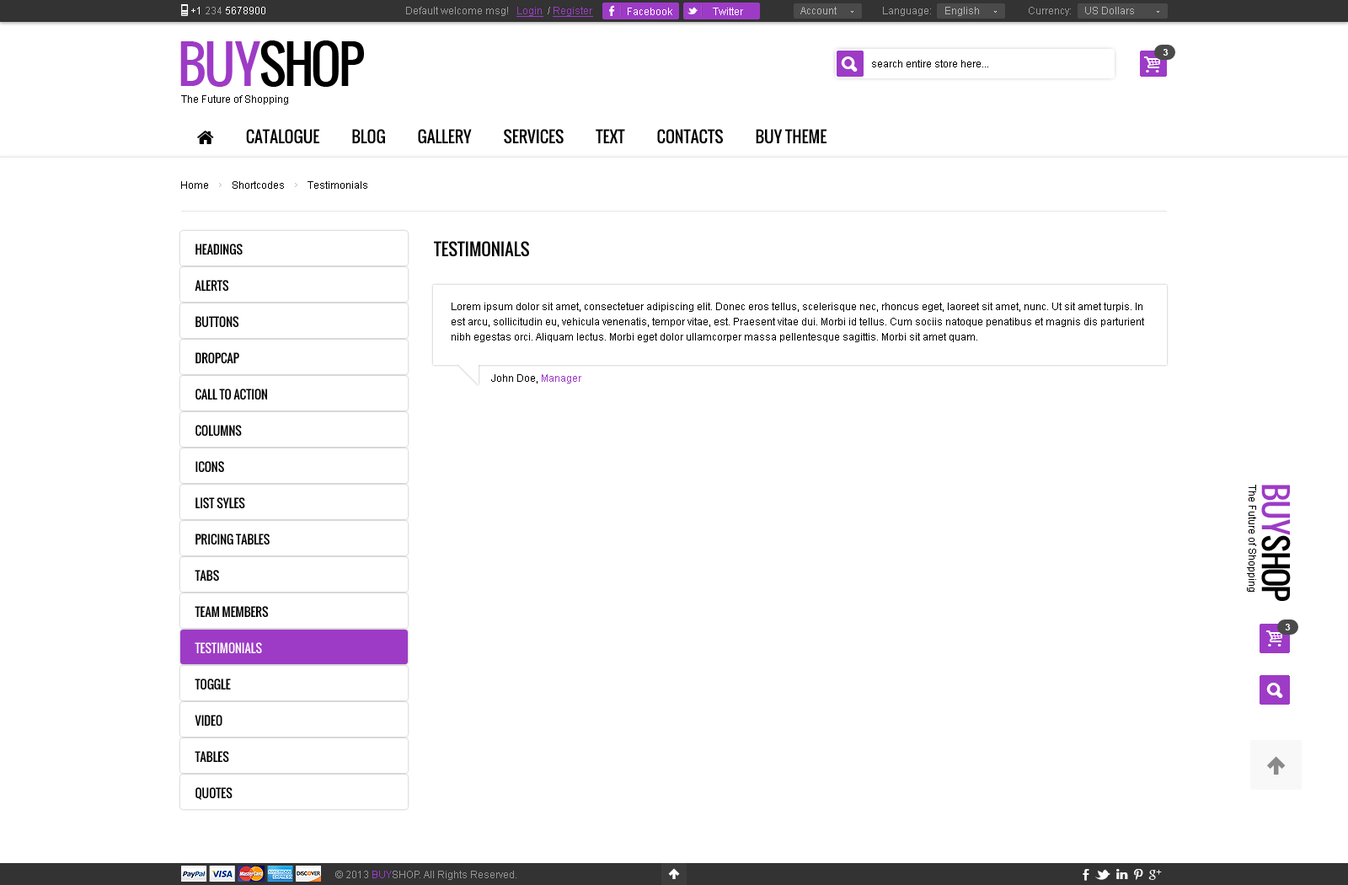
<style>
.page{position:relative;width:1348px;height:885px;background:#ffffff}
.page>*{position:absolute;margin:0}
.t1{font:10.1px "ArialMT";color:#ffffff}
.t2{font:10.1px "ArialMT";color:#9b9b9b}
.t3{font:10.1px "ArialMT";color:#9d3bc6;text-decoration:underline}
.t4{font:10.1px "ArialMT";color:#b6b6b6}
.t5{font:50.5px "Oswald";letter-spacing:-0.06em;color:#000000;text-transform:uppercase}
.t6{font:50.5px "Oswald";letter-spacing:-0.06em;color:#9d3bc6;text-transform:uppercase}
.t7{font:9.3px "Arial-BoldMT";color:#ffffff;text-transform:uppercase}
.t8{font:10.1px "ArialMT";color:#000000}
.t9{font:11.8px/36.2px "Oswald";color:#000000;text-transform:uppercase}
.t10{font:11.8px/36.2px "Oswald";color:#ffffff;text-transform:uppercase}
.t11{font:16.8px "Oswald";color:#000000;text-transform:uppercase}
.t12{font:10.1px/15.2px "ArialMT";color:#000000}
.t13{font:10.1px "ArialMT";color:#9d3bc6}
.t14{font:32px "Oswald";letter-spacing:-0.06em;color:#000000;text-transform:uppercase}
.t15{font:32px "Oswald";letter-spacing:-0.06em;color:#9d3bc6;text-transform:uppercase}
.t16{font:10.1px "ArialMT";color:#959595}
</style>
<div class="page">
<p class="t1" style="left:191px;top:7px;width:74px;height:7px">+1 <span class="t2">234 </span>5678900</p>
<p class="t2" style="left:406px;top:7px;width:187px;height:10px">Default welcome msg!   <span class="t3">Login </span> / <span class="t3">Register</span></p>
<p class="t2" style="left:406px;top:7px;width:187px;height:10px">Default welcome msg!   <span class="t3">Login </span> / <span class="t3">Register</span></p>
<p class="t1" style="left:628px;top:8px;width:44px;height:7px">Facebook</p>
<p class="t1" style="left:713px;top:8px;width:30px;height:7px">Twitter</p>
<p class="t4" style="left:800px;top:7px;width:37px;height:7px">Account</p>
<p class="t2" style="left:883px;top:7px;width:96px;height:9px">Language:     <span class="t4">English</span></p>
<p class="t4" style="left:1029px;top:7px;width:105px;height:9px"><span class="t2">Currency:     </span>US Dollars</p>
<p class="t5" style="left:180px;top:40px;width:184px;height:47px"><span class="t6">buy</span>shop</p>
<p class="t7" style="left:1163px;top:49px;width:6px;height:7px">3</p>
<p class="t8" style="left:872px;top:60px;width:116px;height:7px">search entire store here...</p>
<p class="t8" style="left:181px;top:95px;width:107px;height:9px">The Future of Shopping</p>
<p class="t8" style="left:181px;top:181px;width:186px;height:8px">Home         Shortcodes         Testimonials</p>
<p class="t9" style="left:195px;top:243px;width:75px;height:557px">Headings<br>Alerts<br>Buttons<br>Dropcap<br>Call To Action<br>Columns<br>Icons<br>List syles<br>Pricing Tables<br>Tabs<br>Team Members<br><span class="t10">Testimonials<br></span>Toggle<br>Video<br>Tables<br>Quotes</p>
<p class="t11" style="left:434px;top:241px;width:95px;height:16px">Testimonials</p>
<p class="t12" style="left:452px;top:302px;width:692px;height:40px">Lorem ipsum dolor sit amet, consectetuer adipiscing elit. Donec eros tellus, scelerisque nec, rhoncus eget, laoreet sit amet, nunc. Ut sit amet turpis. In est arcu, sollicitudin eu, vehicula venenatis, tempor vitae, est. Praesent vitae dui. Morbi id tellus. Cum sociis natoque penatibus et magnis dis parturient nibh egestas orci. Aliquam lectus. Morbi eget dolor ullamcorper massa pellentesque sagittis. Morbi sit amet quam.</p>
<p class="t8" style="left:491px;top:374px;width:90px;height:9px">John Doe, <span class="t13">Manager</span></p>
<p class="t8" style="left:1247px;top:484px;width:9px;height:107px;rotate:90deg">The Future of Shopping</p>
<p class="t14" style="left:1261px;top:484px;width:30px;height:117px;rotate:90deg"><span class="t15">buy</span>shop</p>
<p class="t7" style="left:1285px;top:623px;width:6px;height:7px">3</p>
<p class="t16" style="left:335px;top:870px;width:181px;height:10px">© 2013 <span class="t13">BUY</span>SHOP. All Rights Reserved.</p>
</div>
